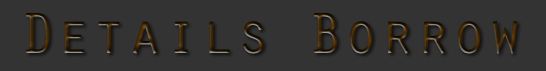
<style>
.page{position:relative;width:546px;height:71px;background:#333333}
.page>*{position:absolute;margin:0}
.t1{font:60px "OratorStd"}
</style>
<div class="page">
<p class="t1" style="left:26px;top:13px;width:492px;height:41px">Details Borrow</p>
</div>
